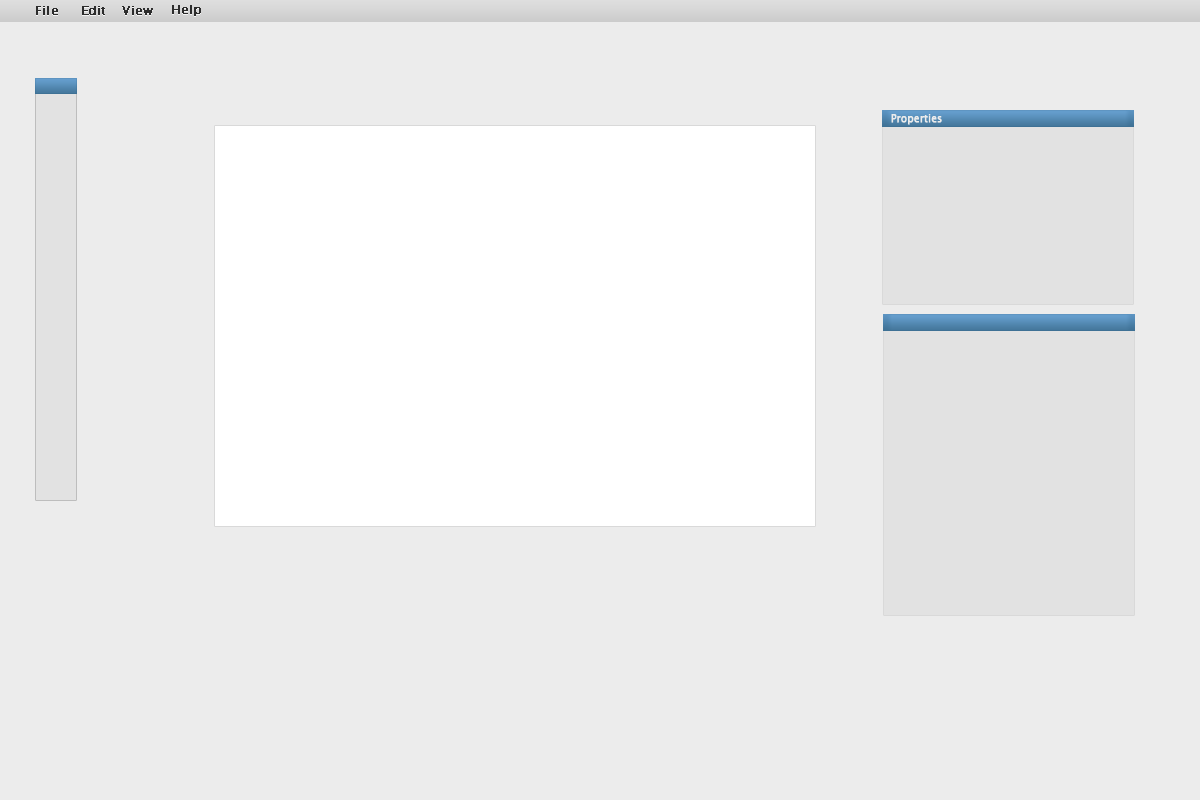
<style>
.page{position:relative;width:1200px;height:800px;background:#ececec}
.page>*{position:absolute;margin:0}
.t1{font:12px "LucidaGrande";color:#2d2d2d;font-weight:bold}
.t2{font:10px "LucidaGrande";color:#ffffff;font-weight:bold}
</style>
<div class="page">
<p class="t1" style="left:36px;top:6px;width:22px;height:9px">File</p>
<p class="t1" style="left:82px;top:6px;width:23px;height:9px">Edit</p>
<p class="t1" style="left:122px;top:6px;width:31px;height:9px">View</p>
<p class="t1" style="left:172px;top:5px;width:29px;height:11px">Help</p>
<p class="t2" style="left:891px;top:114px;width:51px;height:11px">Properties</p>
</div>
